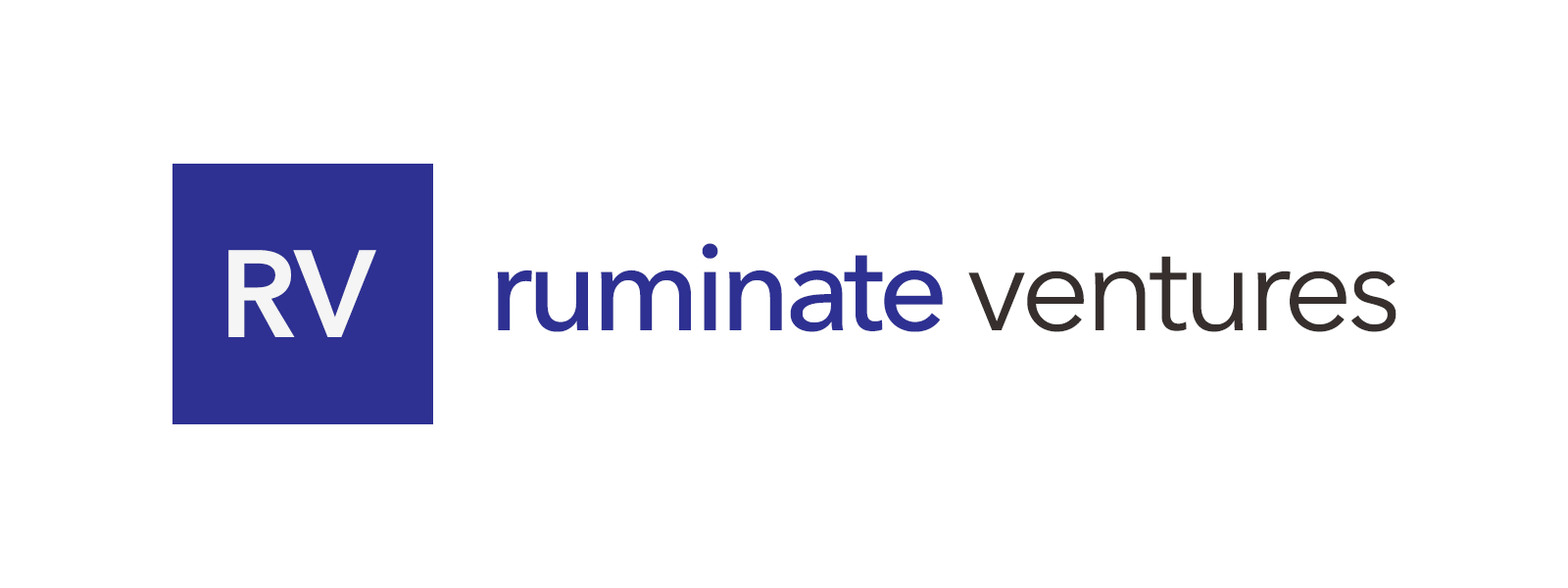
<style>
.page{position:relative;width:1568px;height:588px;background:#ffffff}
.page>*{position:absolute;margin:0}
.t1{font:122.5px "AvenirNext-Medium";letter-spacing:-0.05em;color:#2e3192}
.t2{font:122.5px "AvenirNext-Regular";letter-spacing:-0.05em;color:#362f2d}
.t3{font:122.5px "AvenirNext-DemiBold";color:#f5f5f5}
</style>
<div class="page">
<p class="t1" style="left:497px;top:243px;width:899px;height:89px">ruminate <span class="t2">ventures</span></p>
<p class="t3" style="left:228px;top:250px;width:148px;height:87px">RV</p>
</div>
